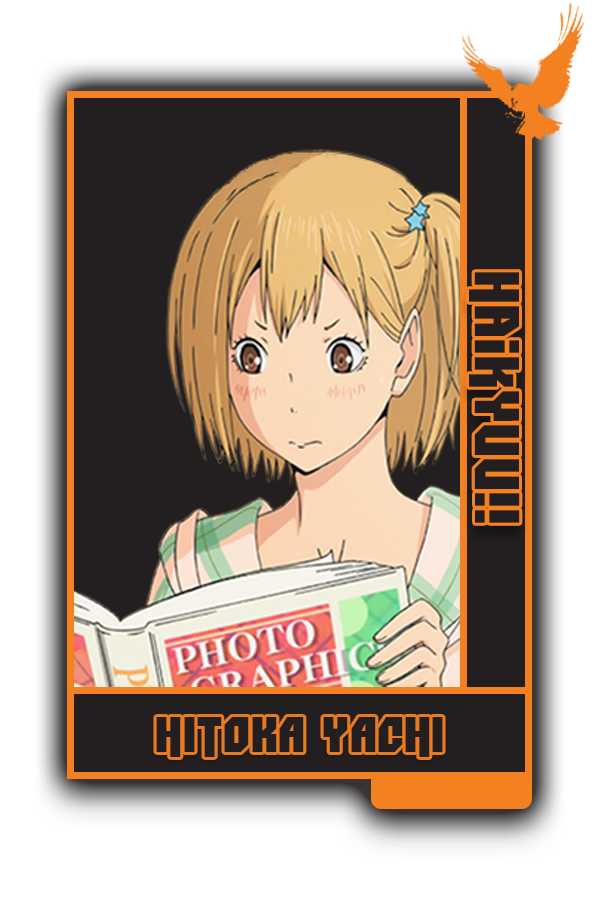
<style>
.page{position:relative;width:600px;height:900px;background:#231f20}
.page>*{position:absolute;margin:0}
.t1{font:62.9px "Dimitri";color:#231f20}
.t2{font:50.5px "Dimitri";color:#231f20}
</style>
<div class="page">
<p class="t1" style="left:469px;top:272px;width:51px;height:251px;rotate:90deg">Haikyuu!!</p>
<p class="t2" style="left:156px;top:717px;width:287px;height:40px">HITOKA YACHI</p>
</div>
